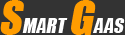
<style>
.page{position:relative;width:125px;height:35px;background:#333333}
.page>*{position:absolute;margin:0}
.t1{font:43.7px "Impact";color:#ff9c00;font-style:italic}
.t2{font:19.2px "Impact";color:#ffffff;font-style:italic}
</style>
<div class="page">
<p class="t1" style="left:0px;top:0px;width:24px;height:35px">S</p>
<p class="t1" style="left:71px;top:0px;width:25px;height:35px">G</p>
<p class="t2" style="left:22px;top:18px;width:46px;height:15px">MART</p>
<p class="t2" style="left:93px;top:18px;width:32px;height:15px">AAS</p>
</div>
